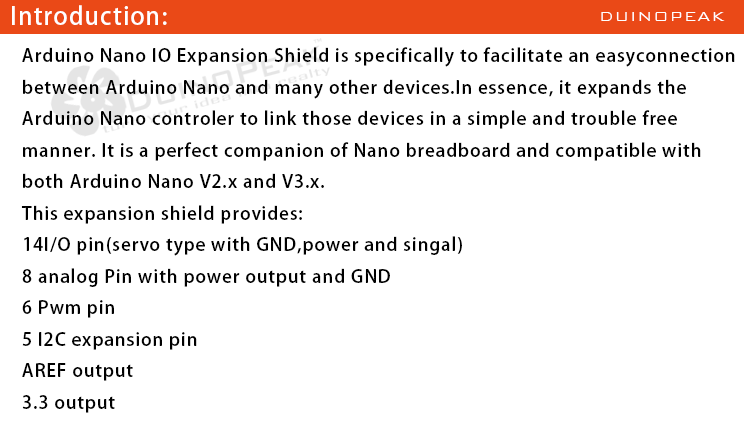
<style>
.page{position:relative;width:744px;height:422px;background:#ffffff}
.page>*{position:absolute;margin:0}
.t1{font:24px "AdobeHeitiStd-Regular";letter-spacing:0.05em;color:#ffffff}
.t2{font:18px "BankGothicBT-Light";letter-spacing:0.05em;color:#ffffff}
.t3{font:18px "AdobeHeitiStd-Regular";letter-spacing:0.05em;color:#000000}
</style>
<div class="page">
<p class="t1" style="left:12px;top:5px;width:155px;height:20px">Introduction:</p>
<p class="t2" style="left:601px;top:12px;width:124px;height:9px">DUINOPEAK</p>
<p class="t3" style="left:21px;top:47px;width:714px;height:366px">Arduino Nano IO Expansion Shield is specifically to facilitate an easyconnection <br>between Arduino Nano and many other devices.In essence, it expands the <br>Arduino Nano controler to link those devices in a simple and trouble free <br>manner. It is a perfect companion of Nano breadboard and compatible with <br>both Arduino Nano V2.x and V3.x.<br>This expansion shield provides:<br>14I/O pin(servo type with GND,power and singal)<br>8 analog Pin with power output and GND<br>6 Pwm pin<br>5 I2C expansion pin<br>AREF output<br>3.3 output</p>
</div>
